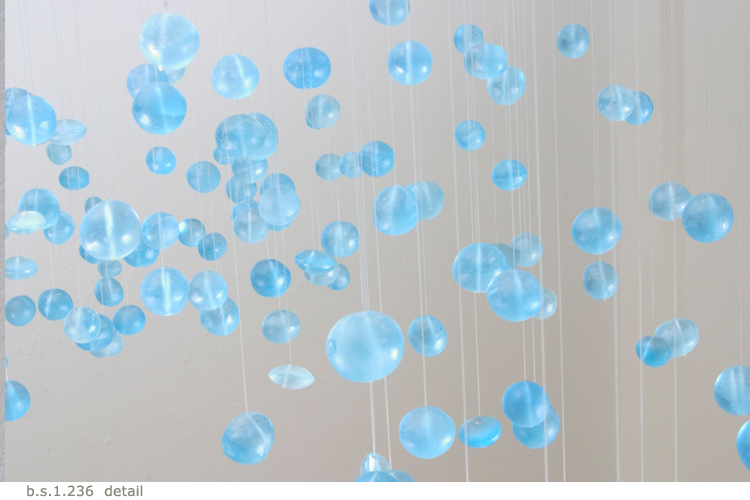
<style>
.page{position:relative;width:750px;height:500px}
.page>*{position:absolute;margin:0}
.t1{font:14px "Verdana";letter-spacing:0.01em;color:#898a7d}
</style>
<div class="page">
<p class="t1" style="left:27px;top:485px;width:116px;height:12px">b.s.1.236  detail</p>
</div>
